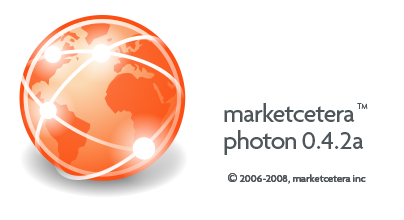
<style>
.page{position:relative;width:404px;height:220px;background:#ffffff}
.page>*{position:absolute;margin:0}
.t1{font:26.7px "Agenda-Medium";letter-spacing:-0.04em;color:#4e5659}
.t2{font:26.7px "Agenda-Medium";letter-spacing:-0.01em;color:#4e5659}
.t3{font:26.7px "Agenda-Medium";color:#4e5659}
.t4{font:8px "Agenda-Light";color:#4e5659}
.t5{font:10.7px "Agenda-Medium";color:#4e5659}
.t6{font:18.7px "Agenda-Medium";color:#4e5659}
</style>
<div class="page">
<p class="t1" style="left:224px;top:103px;width:140px;height:52px">marketcetera<br>photon <span class="t2">0.</span><span class="t3">4.</span><span class="t2">2a</span></p>
<p class="t4" style="left:357px;top:103px;width:11px;height:6px">TM</p>
<p class="t5" style="left:228px;top:173px;width:138px;height:11px"><span class="t6">©</span> 2006-2008, marketcetera inc</p>
</div>
